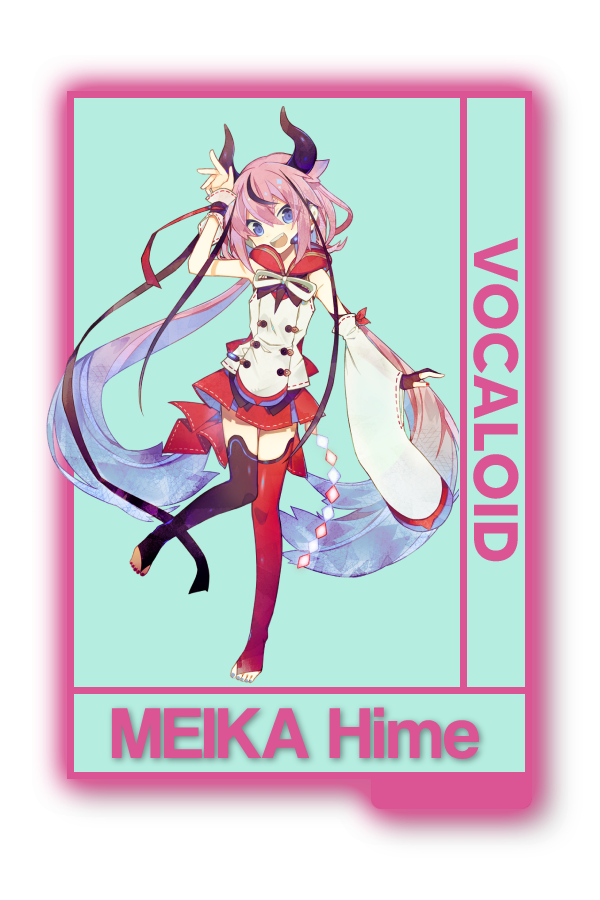
<style>
.page{position:relative;width:600px;height:900px;background:#b5ede1}
.page>*{position:absolute;margin:0}
.t1{font:62.5px "MADETOMMY-Bold";color:#db5493}
.t2{font:75px "CoolveticaRg-Regular";color:#db5493}
</style>
<div class="page">
<p class="t1" style="left:473px;top:237px;width:46px;height:325px;rotate:90deg">VOCALOID</p>
<p class="t2" style="left:111px;top:707px;width:369px;height:52px">MEIKA Hime</p>
</div>
